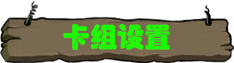
<style>
.page{position:relative;width:234px;height:63px;background:#ffffff}
.page>*{position:absolute;margin:0}
.t1{font:27.2px "STHupo";color:#1df900}
</style>
<div class="page">
<p class="t1" style="left:63px;top:24px;width:107px;height:26px">卡组设置</p>
</div>
